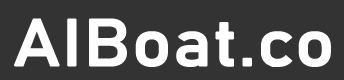
<style>
.page{position:relative;width:344px;height:80px;background:#333333}
.page>*{position:absolute;margin:0}
.t1{font:64.8px "Bahnschrift";color:#ffffff;font-weight:bold;scale:1.11 1}
</style>
<div class="page">
<p class="t1" style="left:14px;top:18px;width:317px;height:49px">AIBoat.co</p>
</div>
